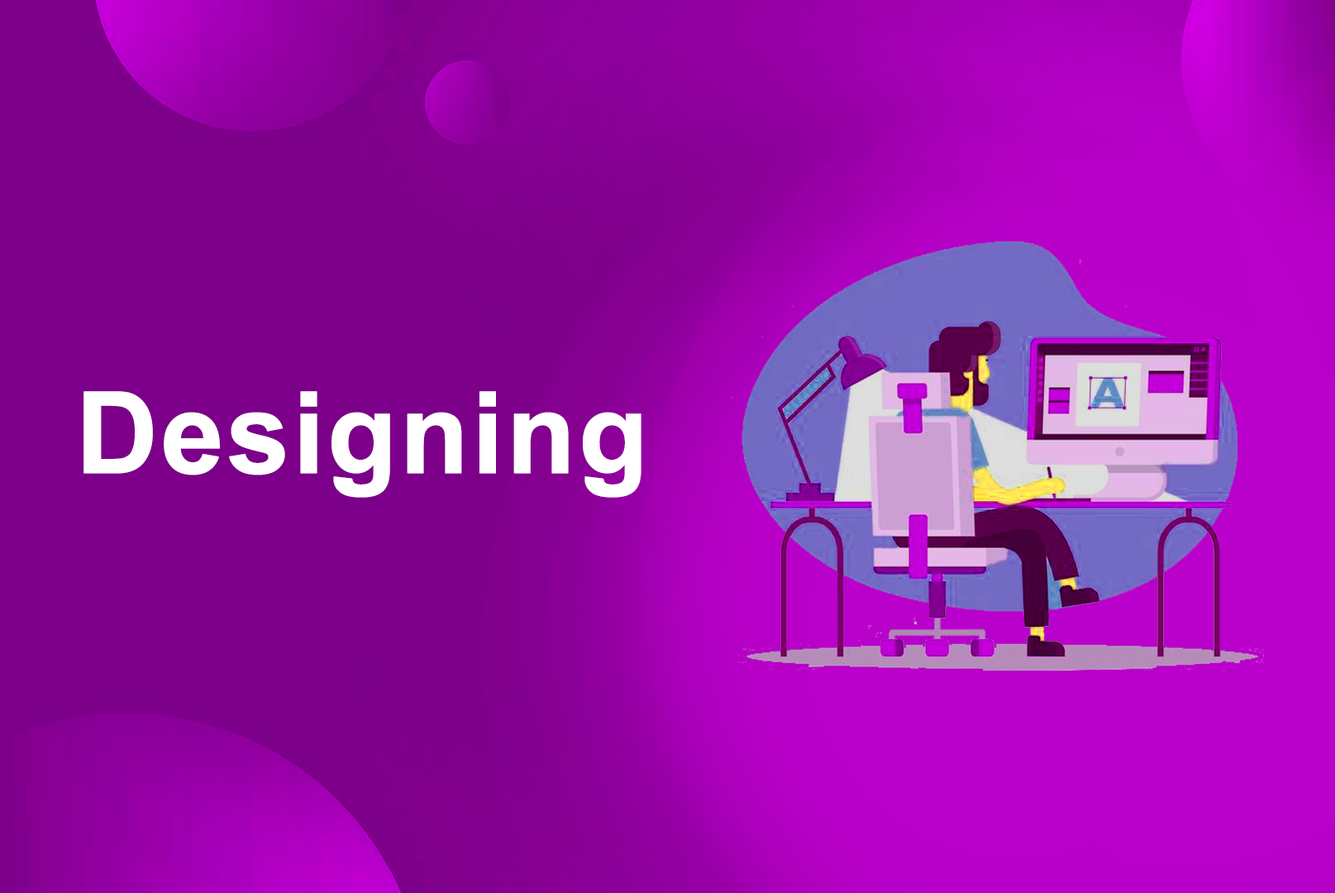
<style>
.page{position:relative;width:1335px;height:893px;background:#7c0089}
.page>*{position:absolute;margin:0}
.t1{font:113.3px "Arial-BoldMT";color:#ffffff;font-weight:bold}
</style>
<div class="page">
<p class="t1" style="left:84px;top:391px;width:558px;height:107px">Designing</p>
</div>
